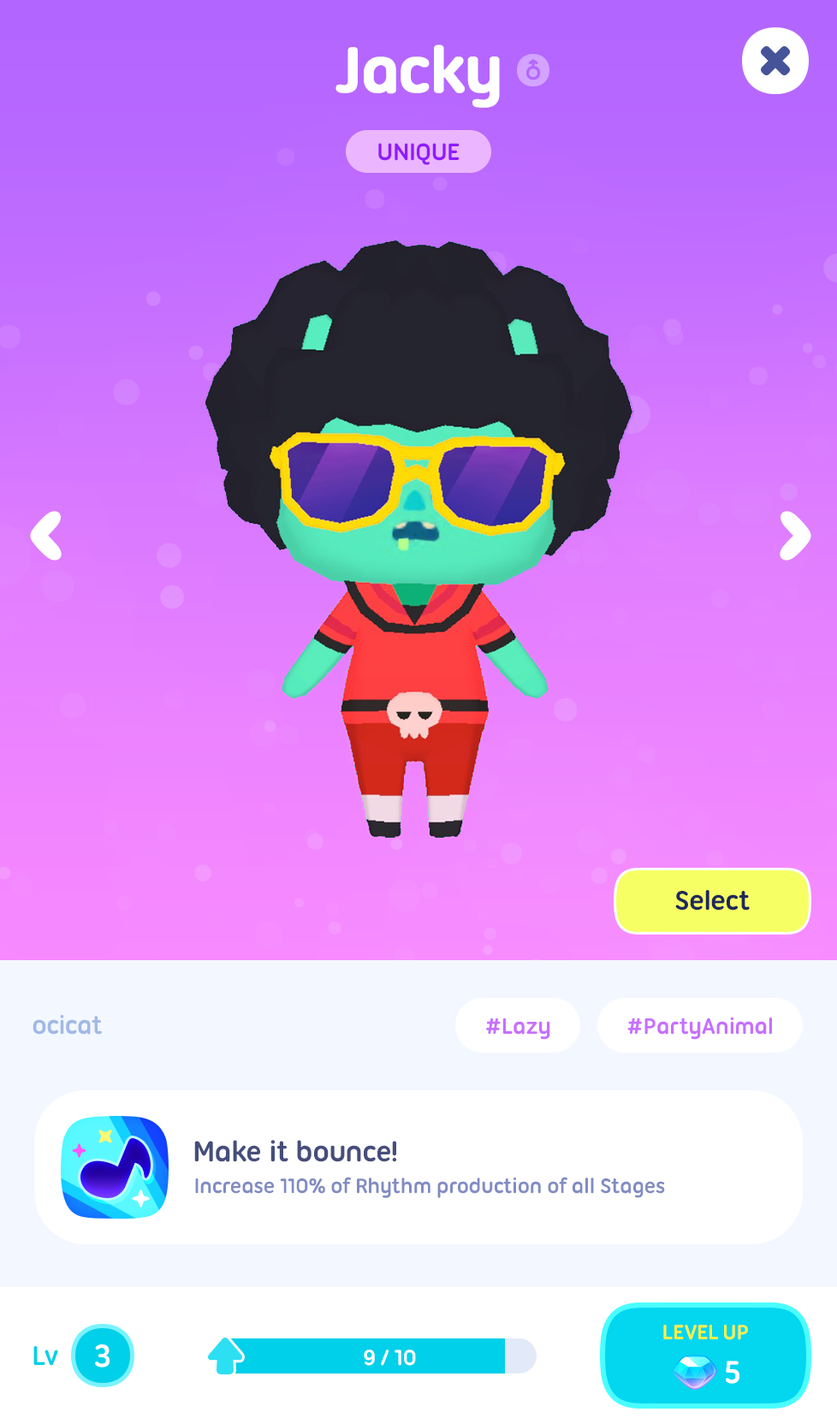
<style>
.page{position:relative;width:837px;height:1424px}
.page>*{position:absolute;margin:0}
.t1{font:68.5px "UbuntuTitling-Bold";letter-spacing:-0.025em;color:#ffffff;font-weight:bold}
.t2{font:25.7px "UbuntuTitling-Bold";letter-spacing:-0.025em;color:#8e1bff;text-transform:uppercase}
.t3{font:29.1px "UbuntuTitling-Bold";letter-spacing:-0.025em;color:#1f285b}
.t4{font:27.4px "UbuntuTitling-Bold";letter-spacing:-0.025em;color:#a0b9e6}
.t5{font:24px "UbuntuTitling-Bold";letter-spacing:-0.025em;color:#c76fff}
.t6{font:30.8px "UbuntuTitling-Bold";letter-spacing:-0.025em;color:#454e7b}
.t7{font:22.3px "UbuntuTitling-Bold";letter-spacing:-0.025em;color:#818cc2}
.t8{font:22.3px "UbuntuTitling-Bold";letter-spacing:-0.035em;color:#fff045;text-transform:uppercase}
.t9{font:29.1px "UbuntuTitling-Bold";letter-spacing:-0.025em;color:#00d0e9}
.t10{font:34.2px "UbuntuTitling-Bold";letter-spacing:-0.025em;color:#ffffff}
.t11{font:23.3px "UbuntuTitling-Bold";letter-spacing:-0.025em;color:#ffffff}
</style>
<div class="page">
<p class="t1" style="left:336px;top:45px;width:164px;height:63px">Jacky</p>
<p class="t2" style="left:378px;top:143px;width:82px;height:22px">Unique</p>
<p class="t3" style="left:675px;top:890px;width:75px;height:21px">Select</p>
<p class="t4" style="left:33px;top:1015px;width:69px;height:20px">ocicat</p>
<p class="t5" style="left:486px;top:1018px;width:64px;height:22px">#Lazy</p>
<p class="t5" style="left:627px;top:1017px;width:145px;height:23px">#PartyAnimal</p>
<p class="t6" style="left:194px;top:1140px;width:202px;height:22px">Make it bounce!</p>
<p class="t7" style="left:195px;top:1177px;width:470px;height:21px">Increase 110% of Rhythm production of all Stages</p>
<p class="t8" style="left:663px;top:1325px;width:85px;height:15px">Level Up</p>
<p class="t9" style="left:33px;top:1346px;width:25px;height:20px">Lv</p>
<p class="t10" style="left:95px;top:1345px;width:15px;height:23px">3</p>
<p class="t11" style="left:364px;top:1350px;width:52px;height:16px">9 / 10</p>
<p class="t10" style="left:726px;top:1361px;width:14px;height:23px">5</p>
</div>
